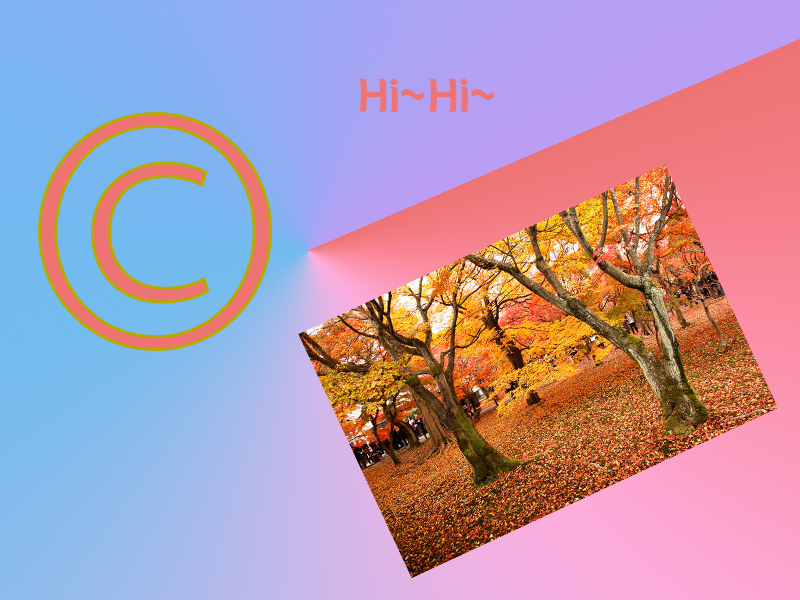
<style>
.page{position:relative;width:800px;height:600px}
.page>*{position:absolute;margin:0}
.t1{font:48px "DFPOP2-W9-WINP-BF";color:#ee7474}
</style>
<div class="page">
<p class="t1" style="left:358px;top:78px;width:137px;height:34px">Hi~Hi~</p>
</div>
